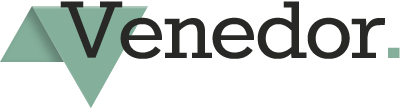
<style>
.page{position:relative;width:400px;height:108px;background:#ffffff}
.page>*{position:absolute;margin:0}
.t1{font:100px "Rokkitt";letter-spacing:-0.025em;color:#282926}
.t2{font:100px "Rokkitt";letter-spacing:-0.025em;color:#84af9b}
</style>
<div class="page">
<p class="t1" style="left:60px;top:1px;width:340px;height:58px">Venedor<span class="t2">.</span></p>
</div>
